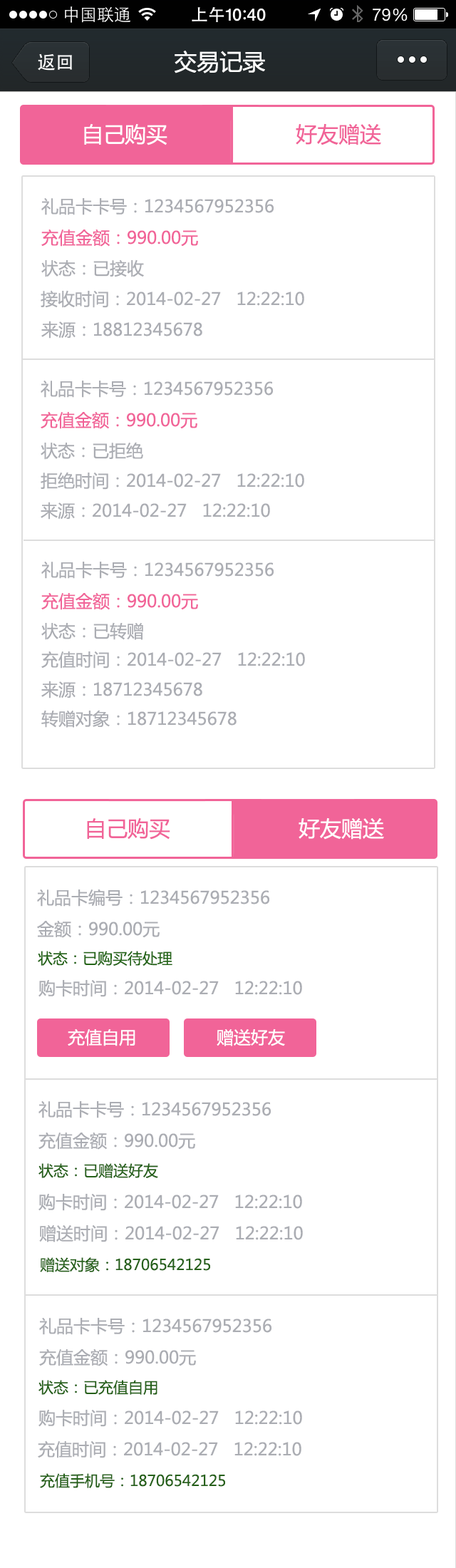
<style>
.page{position:relative;width:456px;height:1568px;background:#ffffff}
.page>*{position:absolute;margin:0}
.t1{font:22.8px "MicrosoftYaHei";color:#ffffff}
.t2{font:21.4px "MicrosoftYaHei";color:#ffffff}
.t3{font:21.4px "MicrosoftYaHei";color:#f16498}
.t4{font:17.1px "MicrosoftYaHei";color:#abadb3}
.t5{font:17.1px "MicrosoftYaHei";color:#f16498}
.t6{font:15px "MicrosoftYaHei";color:#236516}
.t7{font:17.1px "MicrosoftYaHei";color:#ffffff}
.t8{font:15px "MicrosoftYaHei";color:#26611a}
</style>
<div class="page">
<p class="t1" style="left:175px;top:51px;width:90px;height:22px">交易记录</p>
<p class="t2" style="left:84px;top:124px;width:83px;height:21px">自己购买</p>
<p class="t3" style="left:296px;top:123px;width:85px;height:22px">好友赠送</p>
<p class="t4" style="left:41px;top:198px;width:233px;height:17px">礼品卡卡号：1234567952356</p>
<p class="t5" style="left:41px;top:229px;width:157px;height:18px">充值金额：990.00元</p>
<p class="t4" style="left:41px;top:259px;width:103px;height:18px">状态：已接收</p>
<p class="t4" style="left:41px;top:290px;width:263px;height:18px">接收时间：2014-02-27   12:22:10</p>
<p class="t4" style="left:41px;top:321px;width:161px;height:18px">来源：18812345678</p>
<p class="t4" style="left:41px;top:381px;width:232px;height:17px">礼品卡卡号：1234567952356</p>
<p class="t5" style="left:41px;top:411px;width:156px;height:18px">充值金额：990.00元</p>
<p class="t4" style="left:41px;top:442px;width:102px;height:18px">状态：已拒绝</p>
<p class="t4" style="left:41px;top:472px;width:263px;height:18px">拒绝时间：2014-02-27   12:22:10</p>
<p class="t4" style="left:41px;top:502px;width:229px;height:18px">来源：2014-02-27   12:22:10</p>
<p class="t4" style="left:41px;top:562px;width:233px;height:17px">礼品卡卡号：1234567952356</p>
<p class="t5" style="left:41px;top:592px;width:157px;height:18px">充值金额：990.00元</p>
<p class="t4" style="left:41px;top:622px;width:102px;height:18px">状态：已转赠</p>
<p class="t4" style="left:41px;top:651px;width:264px;height:18px">充值时间：2014-02-27   12:22:10</p>
<p class="t4" style="left:41px;top:681px;width:161px;height:17px">来源：18712345678</p>
<p class="t4" style="left:41px;top:710px;width:196px;height:18px">转赠对象：18712345678</p>
<p class="t3" style="left:87px;top:818px;width:83px;height:22px">自己购买</p>
<p class="t2" style="left:299px;top:817px;width:85px;height:23px">好友赠送</p>
<p class="t4" style="left:37px;top:889px;width:232px;height:18px">礼品卡编号：1234567952356</p>
<p class="t4" style="left:37px;top:920px;width:123px;height:18px">金额：990.00元</p>
<p class="t6" style="left:38px;top:951px;width:134px;height:15px">状态：已购买待处理</p>
<p class="t4" style="left:38px;top:980px;width:264px;height:17px">购卡时间：2014-02-27   12:22:10</p>
<p class="t7" style="left:68px;top:1028px;width:67px;height:18px">充值自用</p>
<p class="t7" style="left:217px;top:1028px;width:68px;height:18px">赠送好友</p>
<p class="t4" style="left:38px;top:1101px;width:233px;height:17px">礼品卡卡号：1234567952356</p>
<p class="t4" style="left:38px;top:1132px;width:157px;height:18px">充值金额：990.00元</p>
<p class="t8" style="left:38px;top:1163px;width:120px;height:15px">状态：已赠送好友</p>
<p class="t4" style="left:38px;top:1194px;width:264px;height:17px">购卡时间：2014-02-27   12:22:10</p>
<p class="t4" style="left:39px;top:1225px;width:264px;height:17px">赠送时间：2014-02-27   12:22:10</p>
<p class="t8" style="left:40px;top:1257px;width:170px;height:15px">赠送对象：18706542125</p>
<p class="t4" style="left:39px;top:1318px;width:233px;height:17px">礼品卡卡号：1234567952356</p>
<p class="t4" style="left:39px;top:1348px;width:157px;height:18px">充值金额：990.00元</p>
<p class="t8" style="left:38px;top:1380px;width:120px;height:15px">状态：已充值自用</p>
<p class="t4" style="left:38px;top:1410px;width:264px;height:17px">购卡时间：2014-02-27   12:22:10</p>
<p class="t4" style="left:38px;top:1440px;width:263px;height:18px">充值时间：2014-02-27   12:22:10</p>
<p class="t8" style="left:40px;top:1473px;width:185px;height:15px">充值手机号：18706542125</p>
</div>
